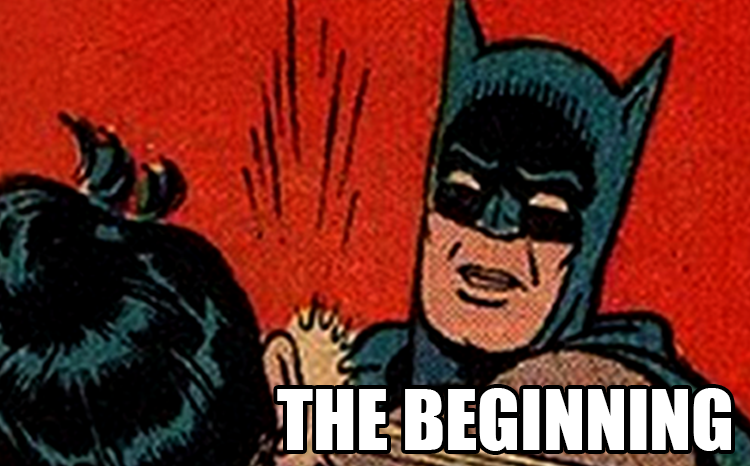
<style>
.page{position:relative;width:750px;height:466px}
.page>*{position:absolute;margin:0}
.t1{font:77.5px "Impact";color:#ffffff}
</style>
<div class="page">
<p class="t1" style="left:277px;top:388px;width:454px;height:63px">THE BEGINNING</p>
</div>
